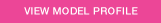
<style>
.page{position:relative;width:161px;height:23px;background:#ec4697}
.page>*{position:absolute;margin:0}
.t1{font:10px "HelveticaNeue-Medium";letter-spacing:0.025em;color:#ffffff}
</style>
<div class="page">
<p class="t1" style="left:24px;top:7px;width:114px;height:8px">VIEW MODEL PROFILE</p>
</div>
